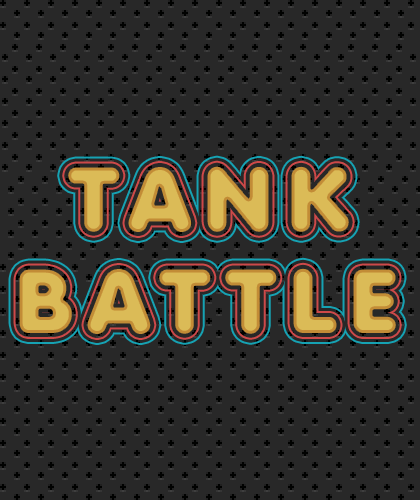
<style>
.page{position:relative;width:420px;height:500px;background:#282828}
.page>*{position:absolute;margin:0}
.t1{font:90px "Anja-Eliane-Nornal";letter-spacing:0.15em;color:#dbbb57;text-transform:uppercase}
</style>
<div class="page">
<p class="t1" style="left:67px;top:165px;width:283px;height:68px">Tank</p>
<p class="t1" style="left:18px;top:267px;width:379px;height:68px">Battle</p>
</div>
